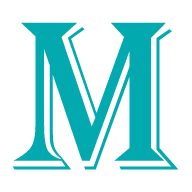
<style>
.page{position:relative;width:192px;height:192px;background:#ffffff}
.page>*{position:absolute;margin:0}
.t1{font:220px "Algerian";letter-spacing:0.03em;color:#02aab0}
</style>
<div class="page">
<p class="t1" style="left:12px;top:22px;width:167px;height:148px">M</p>
</div>
